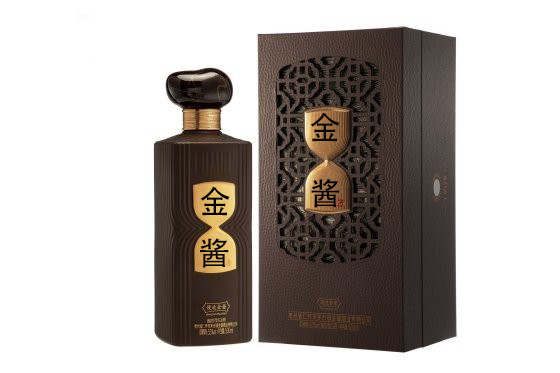
<style>
.page{position:relative;width:560px;height:373px;background:#ffffff}
.page>*{position:absolute;margin:0}
.t1{font:32px "AdobeHeitiStd-Regular";color:#080808}
.t2{font:31.8px "AdobeHeitiStd-Regular";color:#020202}
.t3{font:32px "AdobeHeitiStd-Regular";color:#000000}
.t4{font:32.2px "AdobeHeitiStd-Regular";color:#070707}
</style>
<div class="page">
<p class="t1" style="left:310px;top:112px;width:30px;height:30px">金</p>
<p class="t2" style="left:311px;top:178px;width:29px;height:30px">酱</p>
<p class="t3" style="left:200px;top:186px;width:30px;height:30px">金</p>
<p class="t4" style="left:200px;top:238px;width:29px;height:30px">酱</p>
</div>
